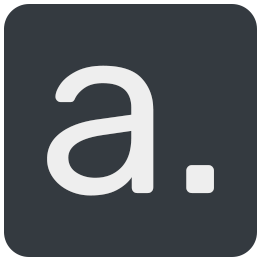
<style>
.page{position:relative;width:260px;height:260px;background:#343a40}
.page>*{position:absolute;margin:0}
.t1{font:240px "Rubik-Regular";color:#eeeeee}
</style>
<div class="page">
<p class="t1" style="left:47px;top:65px;width:167px;height:131px">a.</p>
</div>
